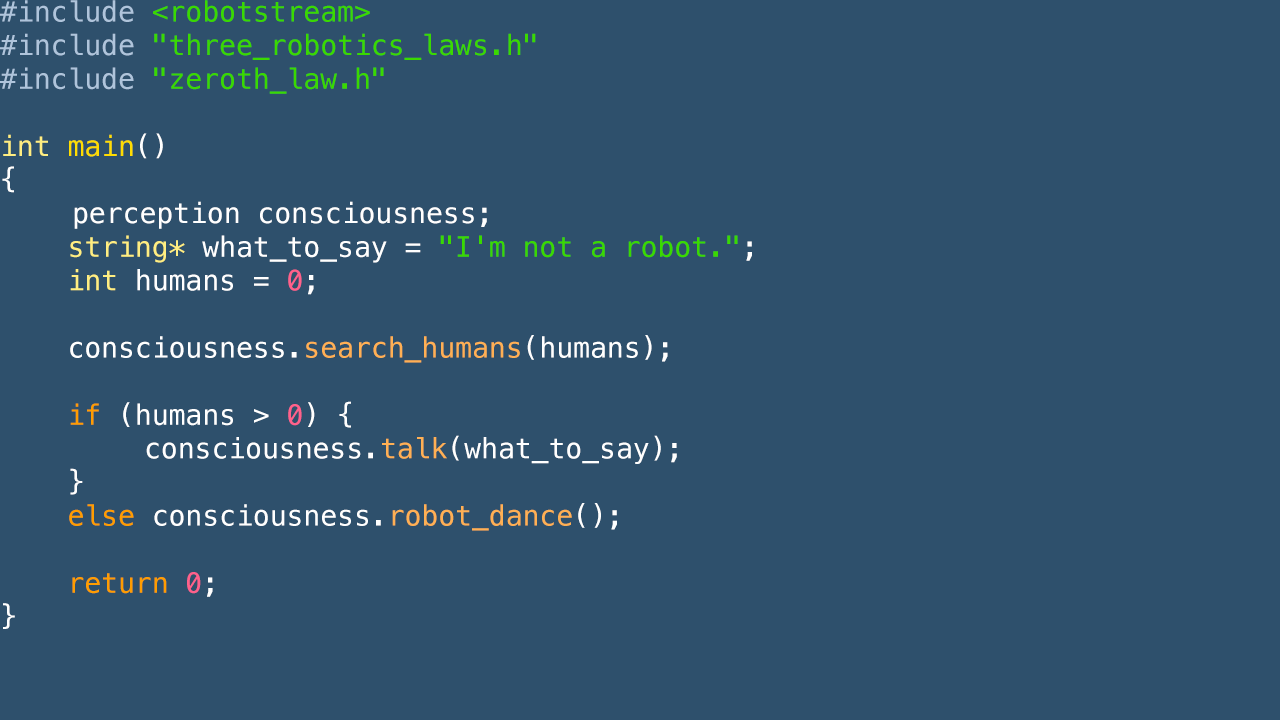
<style>
.page{position:relative;width:1280px;height:720px;background:#2e506c}
.page>*{position:absolute;margin:0}
.t1{font:28px "Menlo-Regular";color:#ffffff}
.t2{font:28px "Menlo-Regular";color:#afc4db}
.t3{font:28px "Menlo-Regular";color:#3ad900}
.t4{font:28px "Menlo-Regular";color:#ffee81}
.t5{font:28px "Menlo-Regular";color:#ffdd00}
.t6{font:28px "Menlo-Regular";color:#ff618b}
.t7{font:28px "Menlo-Regular";color:#ffb054}
.t8{font:28px "Menlo-Regular";color:#ff9d00}
</style>
<div class="page">
<p class="t1" style="left:0px;top:0px;width:752px;height:629px"><span class="t2">#include </span><span class="t3">&lt;robotstream&gt;<br></span><span class="t2">#include </span><span class="t3">"three_robotics_laws.h"<br></span><span class="t2">#include </span><span class="t3">"zeroth_law.h"<br><br></span><span class="t4">int </span><span class="t5">main</span>()<br>{<br>  perception consciousness;<br>    <span class="t4">string*</span> what_to_say = <span class="t3">"I'm not a robot."</span>;<br>    <span class="t4">int</span> humans = <span class="t6">0</span>;<br><br>    consciousness.<span class="t7">search_humans</span>(humans);<br><br>    <span class="t8">if</span> (humans &gt; <span class="t6">0</span>) {<br>       consciousness.<span class="t7">talk</span>(what_to_say);<br>    }<br>    <span class="t8">else</span> consciousness.<span class="t7">robot_dance</span>();<br><br>    <span class="t8">return </span><span class="t6">0</span>;<br>}</p>
</div>
